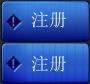
<style>
.page{position:relative;width:90px;height:84px}
.page>*{position:absolute;margin:0}
.t1{font:18px "SimSun";color:#fcfdff}
.t2{font:18px "SimSun";color:#fafcfe}
</style>
<div class="page">
<p class="t1" style="left:31px;top:11px;width:35px;height:17px">注册</p>
<p class="t2" style="left:31px;top:55px;width:35px;height:17px">注册</p>
</div>
